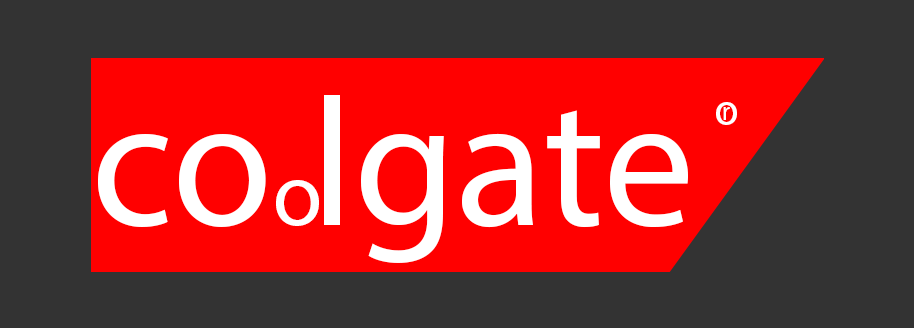
<style>
.page{position:relative;width:914px;height:328px;background:#333333}
.page>*{position:absolute;margin:0}
.t1{font:182.9px "MyriadPro-Regular";color:#ffffff}
.t2{font:45.7px "MyriadPro-Regular";color:#ffffff}
.t3{font:25.4px "MyriadPro-Regular";color:#ffffff}
.t4{font:91.4px "MyriadPro-Regular";color:#ffffff}
</style>
<div class="page">
<p class="t1" style="left:98px;top:95px;width:590px;height:168px">co lgate</p>
<p class="t2" style="left:716px;top:102px;width:21px;height:23px">o</p>
<p class="t3" style="left:723px;top:107px;width:7px;height:13px">r</p>
<p class="t4" style="left:276px;top:180px;width:43px;height:46px">o</p>
</div>
